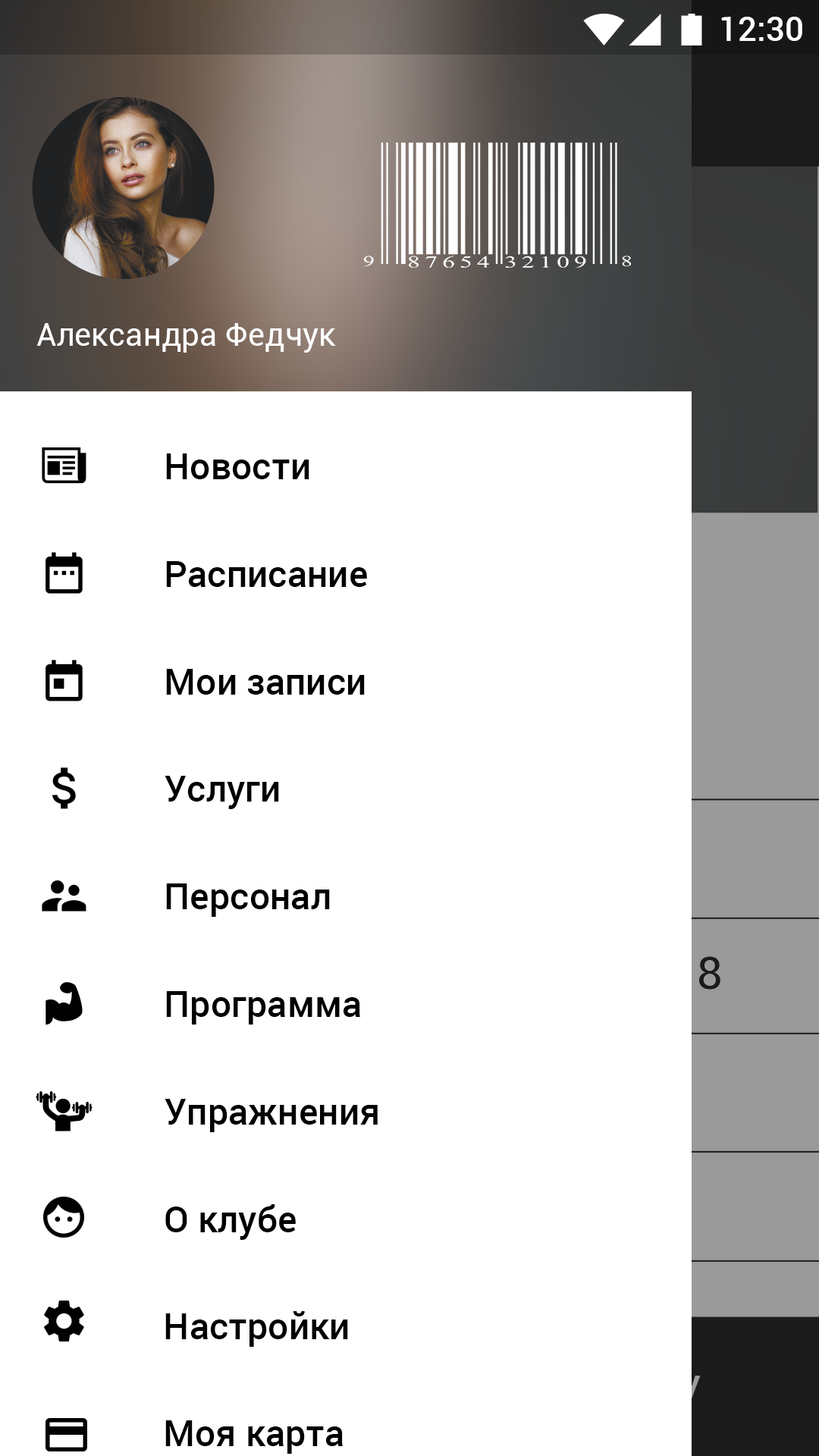
<style>
.page{position:relative;width:819px;height:1456px;background:#ffffff}
.page>*{position:absolute;margin:0}
.t1{font:33.4px "Roboto-Medium";color:#ffffff}
.t2{font:31.8px "Roboto-Regular";color:#ffffff}
.t3{font:36.4px "Roboto-Medium";color:#000000}
</style>
<div class="page">
<p class="t1" style="left:721px;top:17px;width:81px;height:24px">12:30</p>
<p class="t2" style="left:37px;top:323px;width:299px;height:30px">Александра Федчук</p>
<p class="t3" style="left:166px;top:453px;width:143px;height:26px">Новости</p>
<p class="t3" style="left:166px;top:561px;width:201px;height:26px">Расписание</p>
<p class="t3" style="left:166px;top:669px;width:199px;height:26px">Мои записи</p>
<p class="t3" style="left:165px;top:776px;width:114px;height:33px">Услуги</p>
<p class="t3" style="left:166px;top:883px;width:164px;height:34px">Персонал</p>
<p class="t3" style="left:166px;top:991px;width:194px;height:33px">Программа</p>
<p class="t3" style="left:165px;top:1099px;width:213px;height:33px">Упражнения</p>
<p class="t3" style="left:165px;top:1204px;width:131px;height:36px">О клубе</p>
<p class="t3" style="left:165px;top:1311px;width:183px;height:36px">Настройки</p>
<p class="t3" style="left:165px;top:1420px;width:178px;height:34px">Моя карта</p>
</div>
